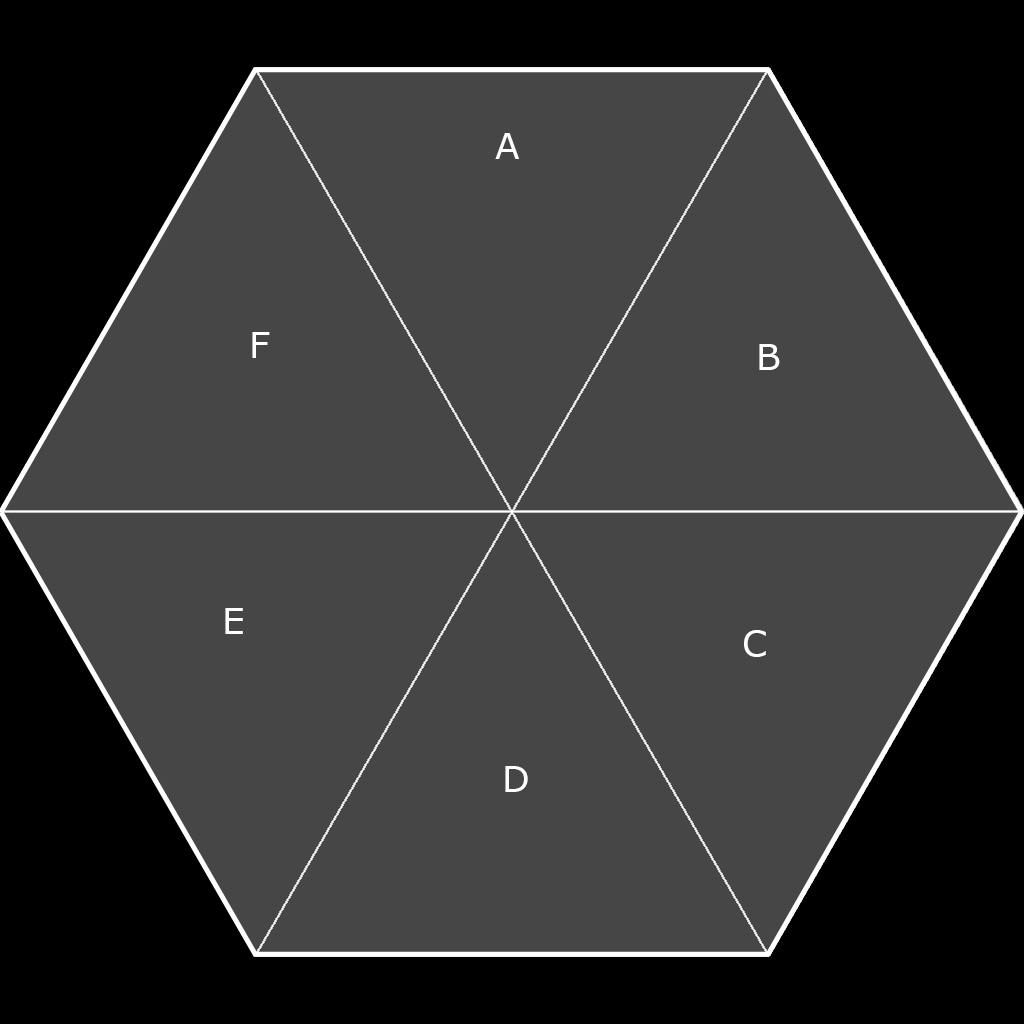
<style>
.page{position:relative;width:1024px;height:1024px;background:#464646}
.page>*{position:absolute;margin:0}
.t1{font:36px "Verdana";color:#ffffff}
</style>
<div class="page">
<p class="t1" style="left:495px;top:133px;width:24px;height:26px">A</p>
<p class="t1" style="left:252px;top:332px;width:18px;height:26px">F</p>
<p class="t1" style="left:759px;top:344px;width:21px;height:26px">B</p>
<p class="t1" style="left:225px;top:608px;width:18px;height:26px">E</p>
<p class="t1" style="left:744px;top:630px;width:22px;height:27px">C</p>
<p class="t1" style="left:505px;top:766px;width:23px;height:26px">D</p>
</div>
